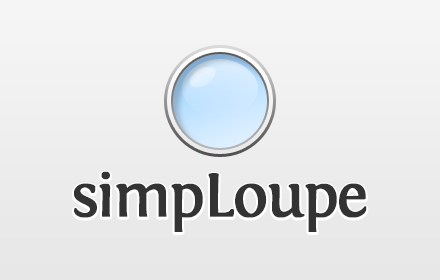
<style>
.page{position:relative;width:440px;height:280px}
.page>*{position:absolute;margin:0}
.t1{font:64px "Fontin-Regular";letter-spacing:-0.05em;color:#333333;font-weight:bold}
</style>
<div class="page">
<p class="t1" style="left:74px;top:171px;width:293px;height:61px">simpLoupe</p>
</div>
